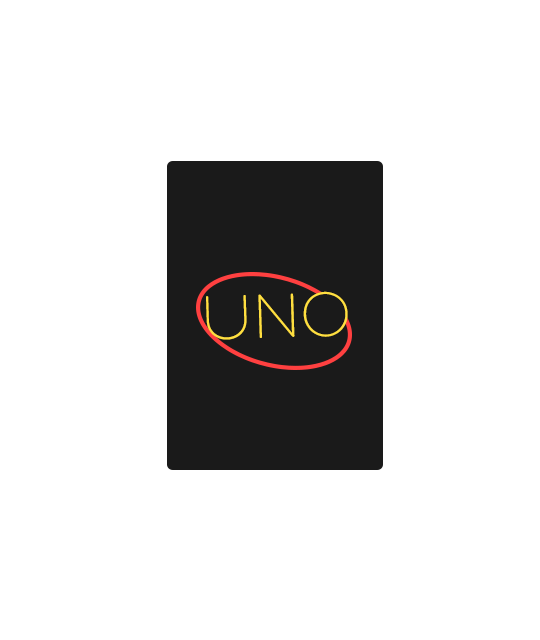
<style>
.page{position:relative;width:540px;height:640px;background:#ffffff}
.page>*{position:absolute;margin:0}
.t1{font:68.3px "Hero-Light";color:#ffdf40}
</style>
<div class="page">
<p class="t1" style="left:206px;top:291px;width:142px;height:49px;rotate:-2deg">UNO</p>
</div>
